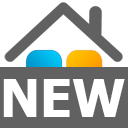
<style>
.page{position:relative;width:128px;height:128px;background:#ffffff}
.page>*{position:absolute;margin:0}
.t1{font:52px "Tahoma-Bold";color:#ffffff}
</style>
<div class="page">
<p class="t1" style="left:3px;top:79px;width:122px;height:38px">NEW</p>
</div>
